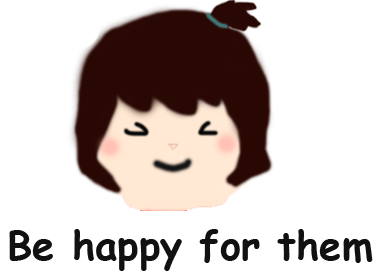
<style>
.page{position:relative;width:380px;height:279px;background:#ffffff}
.page>*{position:absolute;margin:0}
.t1{font:40px "ComicSansMS-Bold";color:#111111}
</style>
<div class="page">
<p class="t1" style="left:9px;top:229px;width:364px;height:42px">Be happy for them</p>
</div>
